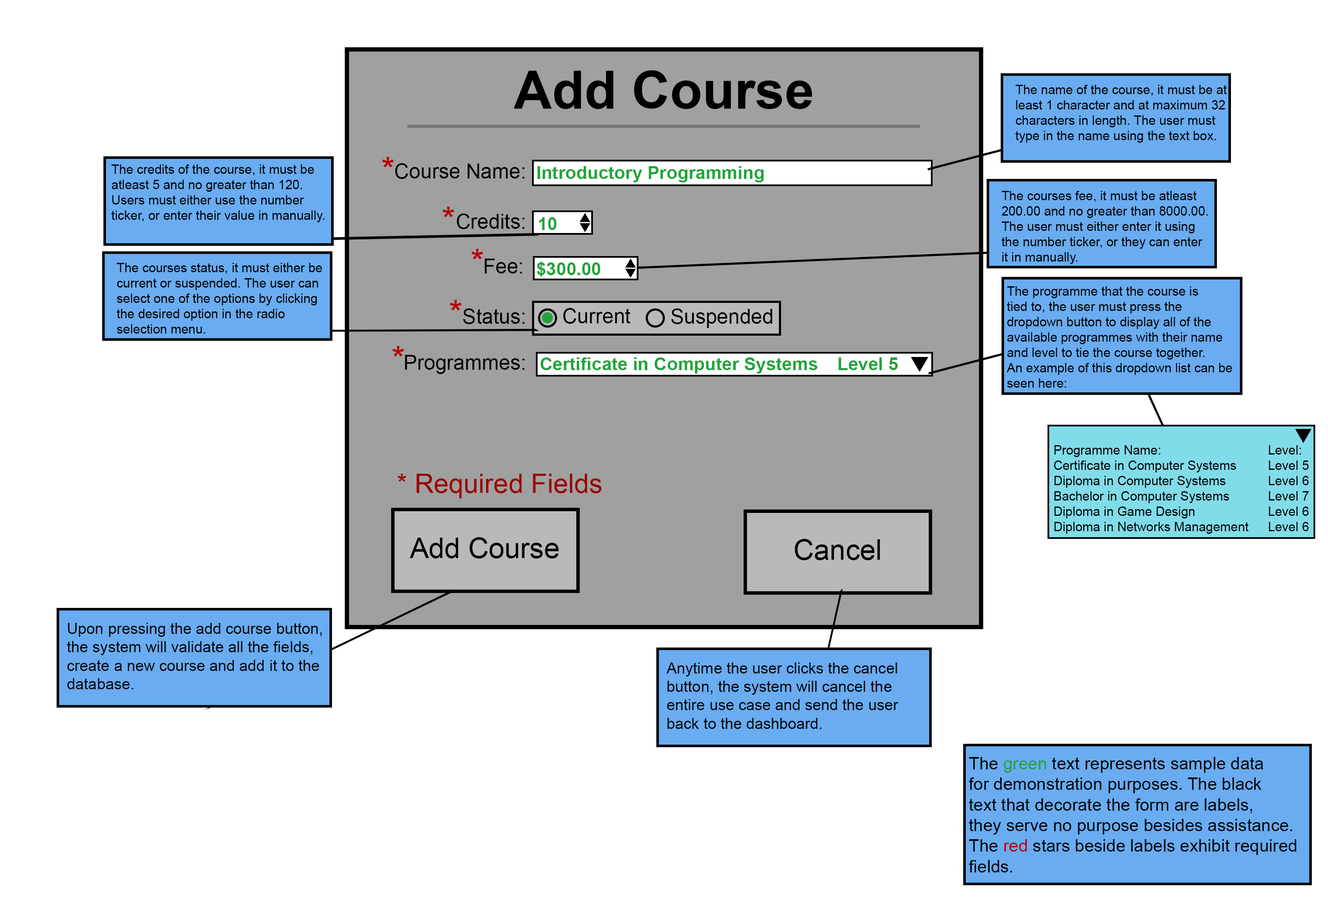
<style>
.page{position:relative;width:1328px;height:898px;background:#ffffff}
.page>*{position:absolute;margin:0}
.t1{font:53px "Arial-BoldMT";color:#000000}
.t2{font:12.8px "ArialMT";color:#000000}
.t3{font:35.3px "ArialMT";color:#b80000}
.t4{font:20.4px "ArialMT";color:#000000}
.t5{font:18px "Arial-BoldMT";color:#21a439}
.t6{font:20.5px "ArialMT";color:#000000}
.t7{font:26.8px "ArialMT";color:#9b0000}
.t8{font:28.4px "ArialMT";color:#000000}
.t9{font:15.4px "ArialMT";color:#000000}
.t10{font:17.2px "ArialMT";color:#000000}
.t11{font:17.2px "ArialMT";color:#21a439}
.t12{font:17.2px "ArialMT";color:#b80000}
</style>
<div class="page">
<p class="t1" style="left:514px;top:70px;width:298px;height:39px">Add Course</p>
<p class="t2" style="left:1016px;top:85px;width:211px;height:58px">The name of the course, it must be at<br>least 1 character and at maximum 32<br>characters in length. The user must <br>type in the name using the text box.</p>
<p class="t3" style="left:382px;top:157px;width:12px;height:10px">*</p>
<p class="t2" style="left:112px;top:164px;width:213px;height:58px">The credits of the course, it must be <br>atleast 5 and no greater than 120. <br>Users must either use the number<br>ticker, or enter their value in manually.</p>
<p class="t4" style="left:395px;top:163px;width:130px;height:16px">Course Name:</p>
<p class="t5" style="left:537px;top:166px;width:227px;height:16px">Introductory Programming</p>
<p class="t2" style="left:1002px;top:191px;width:206px;height:73px">The courses fee, it must be atleast<br>200.00 and no greater than 8000.00.<br>The user must either enter it using <br>the number ticker, or they can enter<br>it in manually.</p>
<p class="t3" style="left:442px;top:207px;width:12px;height:10px">*</p>
<p class="t4" style="left:457px;top:213px;width:68px;height:16px">Credits:</p>
<p class="t5" style="left:539px;top:217px;width:18px;height:13px">10</p>
<p class="t3" style="left:471px;top:249px;width:12px;height:10px">*</p>
<p class="t2" style="left:117px;top:263px;width:205px;height:70px">The courses status, it must either be<br>current or suspended. The user can<br>select one of the options by clicking<br>the desired option in the radio<br>selection menu.</p>
<p class="t6" style="left:485px;top:258px;width:37px;height:15px">Fee:</p>
<p class="t5" style="left:537px;top:261px;width:64px;height:16px">$300.00</p>
<p class="t2" style="left:1007px;top:286px;width:226px;height:101px">The programme that the course is<br>tied to, the user must press the <br>dropdown button to display all of the<br>available programmes with their name<br>and level to tie the course together.<br>An example of this dropdown list can be<br>seen here:</p>
<p class="t3" style="left:450px;top:300px;width:12px;height:10px">*</p>
<p class="t4" style="left:463px;top:308px;width:62px;height:16px">Status:</p>
<p class="t4" style="left:563px;top:308px;width:68px;height:16px">Current</p>
<p class="t4" style="left:671px;top:308px;width:102px;height:20px">Suspended</p>
<p class="t3" style="left:392px;top:346px;width:12px;height:10px">*</p>
<p class="t6" style="left:405px;top:355px;width:120px;height:19px">Programmes:</p>
<p class="t5" style="left:541px;top:357px;width:357px;height:16px">Certificate in Computer Systems  Level 5</p>
<p class="t2" style="left:1054px;top:445px;width:255px;height:89px">Programme Name:       Level:<br>Certificate in Computer Systems   Level 5<br>Diploma in Computer Systems   Level 6<br>Bachelor in Computer Systems   Level 7<br>Diploma in Game Design     Level 6<br>Diploma in Networks Management  Level 6</p>
<p class="t7" style="left:398px;top:473px;width:204px;height:25px">* Required Fields</p>
<p class="t8" style="left:410px;top:537px;width:149px;height:21px">Add Course</p>
<p class="t8" style="left:795px;top:539px;width:86px;height:21px">Cancel</p>
<p class="t9" style="left:67px;top:623px;width:255px;height:66px">Upon pressing the add course button,<br>the system will validate all the fields,<br>create a new course and add it to the<br>database.</p>
<p class="t9" style="left:667px;top:662px;width:232px;height:67px">Anytime the user clicks the cancel<br>button, the system will cancel the<br>entire use case and send the user <br>back to the dashboard.</p>
<p class="t10" style="left:969px;top:757px;width:328px;height:115px">The <span class="t11">green </span>text represents sample data<br>for demonstration purposes. The black<br>text that decorate the form are labels,<br>they serve no purpose besides assistance.<br>The <span class="t12">red </span>stars beside labels exhibit required<br>fields.</p>
</div>
